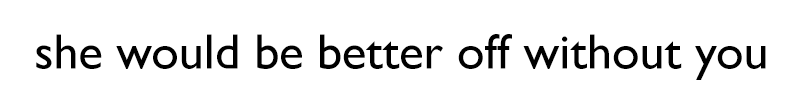
<style>
.page{position:relative;width:800px;height:100px;background:#ffffff}
.page>*{position:absolute;margin:0}
.t1{font:50px "GillSans";color:#000000}
</style>
<div class="page">
<p class="t1" style="left:36px;top:34px;width:730px;height:46px">she would be better off without you</p>
</div>
